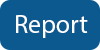
<style>
.page{position:relative;width:100px;height:50px;background:#0c598f}
.page>*{position:absolute;margin:0}
.t1{font:26px "MyriadPro-Regular";color:#ffffff}
</style>
<div class="page">
<p class="t1" style="left:16px;top:15px;width:72px;height:23px">Report</p>
</div>
